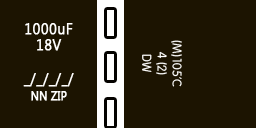
<style>
.page{position:relative;width:256px;height:128px;background:#1c1401}
.page>*{position:absolute;margin:0}
.t1{font:15.7px/16.7px "SegoeUI";letter-spacing:0.02em;color:#ffffff;font-weight:bold;scale:0.89 1}
.t2{font:11.8px/16.7px "SegoeUI";letter-spacing:0.02em;color:#ffffff;font-weight:bold;scale:0.89 1}
.t3{font:12.5px "Vagabond";color:#ffffff}
</style>
<div class="page">
<p class="t1" style="left:23px;top:23px;width:51px;height:78px;text-align:center">1000uF<br>18V<br><br>_/_/_/_/<br><span class="t2">NN ZIP</span></p>
<p class="t3" style="left:142px;top:40px;width:40px;height:47px;text-align:center;rotate:90deg">(M)105’C<br>4 (2)<br>DW</p>
</div>
